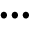
<style>
.page{position:relative;width:30px;height:30px;background:#ffffff}
.page>*{position:absolute;margin:0}
.t1{font:53.1px "MyriadPro-Regular";color:#000000;text-transform:uppercase}
</style>
<div class="page">
<p class="t1" style="left:0px;top:11px;width:29px;height:8px">...</p>
</div>
